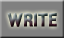
<style>
.page{position:relative;width:64px;height:38px;background:#808080}
.page>*{position:absolute;margin:0}
.t1{font:18px "GothicXB-HM"}
</style>
<div class="page">
<p class="t1" style="left:7px;top:13px;width:50px;height:14px">WRITE</p>
</div>
